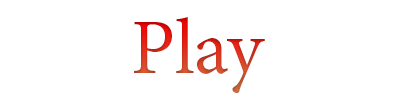
<style>
.page{position:relative;width:400px;height:96px;background:#ffffff}
.page>*{position:absolute;margin:0}
.t1{font:96px "AdobeThai-Regular"}
</style>
<div class="page">
<p class="t1" style="left:134px;top:17px;width:131px;height:76px">Play</p>
</div>
